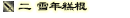
<style>
.page{position:relative;width:130px;height:18px;background:#ffffff}
.page>*{position:absolute;margin:0}
.t1{font:13.5px "LiSu";letter-spacing:-0.075em;color:#161616}
</style>
<div class="page">
<p class="t1" style="left:18px;top:1px;width:69px;height:10px">二 雪年糕棍</p>
</div>
